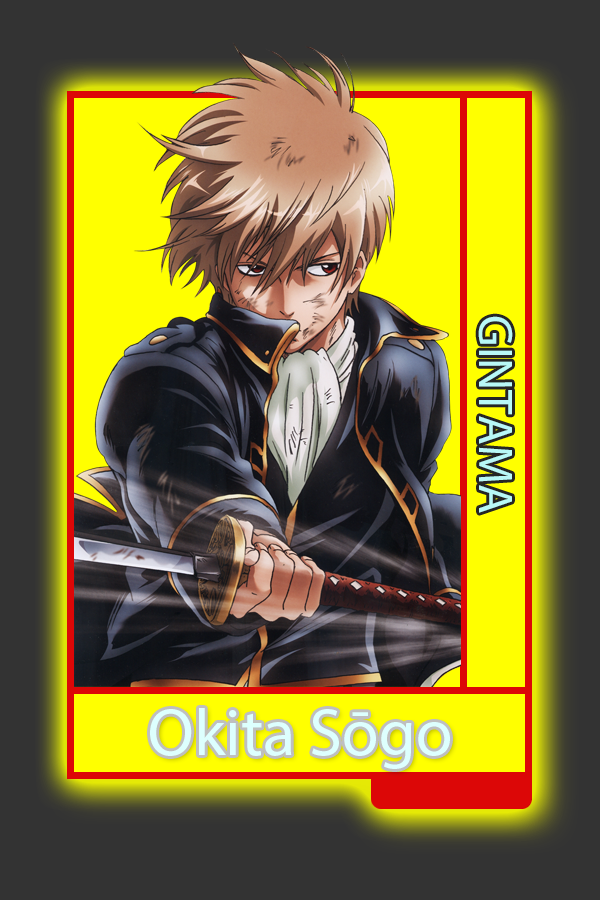
<style>
.page{position:relative;width:600px;height:900px;background:#333333}
.page>*{position:absolute;margin:0}
.t1{font:48.8px "MyriadPro-Regular";color:#b8f8f7}
.t2{font:66.7px "MyriadPro-Regular";color:#ddfffe}
</style>
<div class="page">
<p class="t1" style="left:478px;top:316px;width:35px;height:197px;rotate:90deg">GINTAMA</p>
<p class="t2" style="left:150px;top:708px;width:300px;height:61px">Okita Sōgo</p>
</div>
